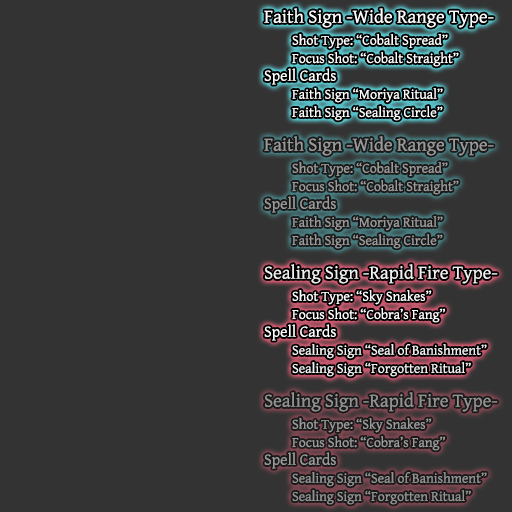
<style>
.page{position:relative;width:512px;height:512px;background:#333333}
.page>*{position:absolute;margin:0}
.t1{font:19px/12px "GentiumBasic";color:#ffffff}
.t2{font:19px/18px "GentiumBasic";color:#ffffff}
.t3{font:16px/22px "GentiumBasic";color:#ffffff}
.t4{font:14px/18px "GentiumBasic";color:#ffffff}
.t5{font:19px/12px "GentiumBasic";color:#9a9a9a}
.t6{font:19px/18px "GentiumBasic";color:#9a9a9a}
.t7{font:16px/22px "GentiumBasic";color:#9a9a9a}
.t8{font:14px/18px "GentiumBasic";color:#9a9a9a}
.t9{font:19px/12px "GentiumBasic";color:#f0f0f0}
.t10{font:14px/18px "GentiumBasic";color:#f0f0f0}
.t11{font:19px/12px "GentiumBasic";color:#929292}
.t12{font:19px/18px "GentiumBasic";color:#929292}
.t13{font:16px/22px "GentiumBasic";color:#929292}
.t14{font:14px/18px "GentiumBasic";color:#929292}
</style>
<div class="page">
<p class="t1" style="left:264px;top:8px;width:230px;height:77px">Faith Sign -Wide Range Type-<span class="t2"><br><br><br></span><span class="t3">Spell Cards</span></p>
<p class="t4" style="left:292px;top:34px;width:167px;height:33px">Shot Type: “Cobalt Spread”<br>Focus Shot: “Cobalt Straight”</p>
<p class="t4" style="left:292px;top:88px;width:151px;height:33px">Faith Sign “Moriya Ritual”<br>Faith Sign “Sealing Circle”</p>
<p class="t5" style="left:264px;top:136px;width:230px;height:77px">Faith Sign -Wide Range Type-<span class="t6"><br><br><br></span><span class="t7">Spell Cards</span></p>
<p class="t8" style="left:292px;top:162px;width:167px;height:33px">Shot Type: “Cobalt Spread”<br>Focus Shot: “Cobalt Straight”</p>
<p class="t8" style="left:292px;top:216px;width:151px;height:33px">Faith Sign “Moriya Ritual”<br>Faith Sign “Sealing Circle”</p>
<p class="t9" style="left:264px;top:264px;width:234px;height:77px">Sealing Sign -Rapid Fire Type-<span class="t2"><br><br><br></span><span class="t3">Spell Cards</span></p>
<p class="t4" style="left:292px;top:290px;width:153px;height:33px">Shot Type: “Sky Snakes”<br>Focus Shot: “Cobra’s Fang”</p>
<p class="t10" style="left:292px;top:344px;width:195px;height:33px">Sealing Sign “Seal of Banishment”<br>Sealing Sign “Forgotten Ritual”</p>
<p class="t11" style="left:264px;top:392px;width:234px;height:77px">Sealing Sign -Rapid Fire Type-<span class="t12"><br><br><br></span><span class="t13">Spell Cards</span></p>
<p class="t8" style="left:292px;top:418px;width:153px;height:33px">Shot Type: “Sky Snakes”<br>Focus Shot: “Cobra’s Fang”</p>
<p class="t14" style="left:292px;top:472px;width:195px;height:33px">Sealing Sign “Seal of Banishment”<br>Sealing Sign “Forgotten Ritual”</p>
</div>
